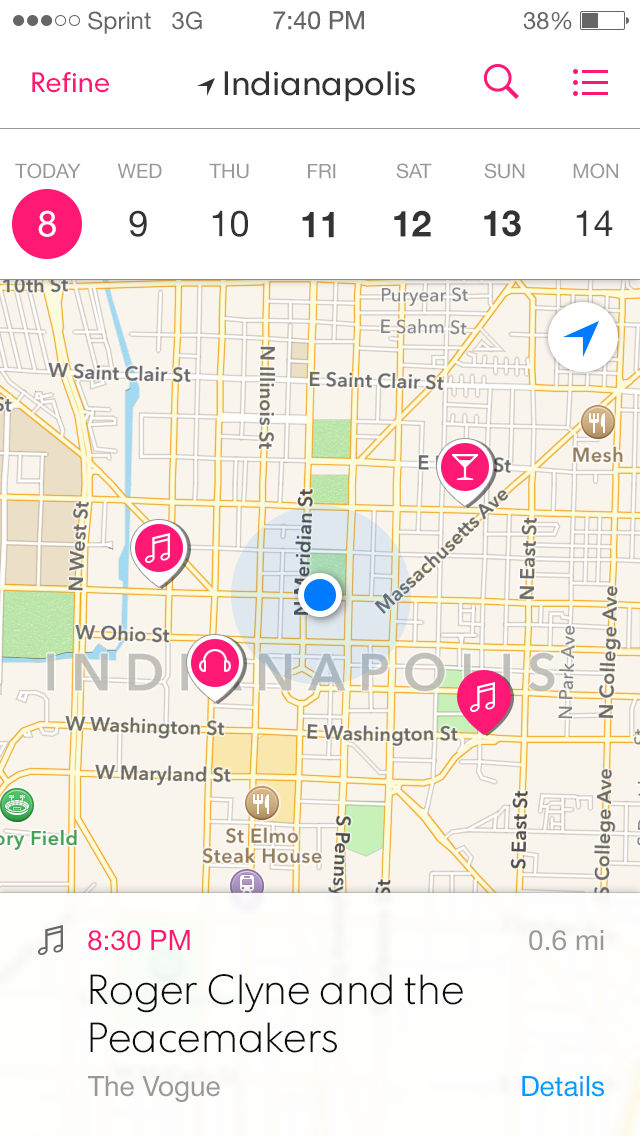
<style>
.page{position:relative;width:640px;height:1136px;background:#ffffff}
.page>*{position:absolute;margin:0}
.t1{font:24px "HelveticaNeue";color:#666666}
.t2{font:25px "HelveticaNeue";color:#666666}
.t3{font:28px "FuturaToday-Normal";color:#ff1975}
.t4{font:34px "FuturaToday-Normal";color:#333333}
.t5{font:20px "HelveticaNeue";color:#999999}
.t6{font:36px "HelveticaNeue";color:#ffffff}
.t7{font:36px "HelveticaNeue";color:#333333}
.t8{font:36px "HelveticaNeue-Bold";color:#333333}
.t9{font:28px "HelveticaNeue";color:#ff1975}
.t10{font:28px "HelveticaNeue";color:#999999}
.t11{font:42px/48px "FuturaToday-Light";color:#0c0c0c}
.t12{font:28px "HelveticaNeue";color:#009bff}
</style>
<div class="page">
<p class="t1" style="left:88px;top:11px;width:114px;height:23px">Sprint   3G</p>
<p class="t2" style="left:273px;top:11px;width:91px;height:19px">7:40 PM</p>
<p class="t1" style="left:523px;top:11px;width:49px;height:19px">38%</p>
<p class="t3" style="left:32px;top:72px;width:77px;height:21px">Refine</p>
<p class="t4" style="left:224px;top:71px;width:191px;height:31px">Indianapolis</p>
<p class="t5" style="left:15px;top:163px;width:66px;height:16px">TODAY</p>
<p class="t5" style="left:117px;top:163px;width:45px;height:15px">WED</p>
<p class="t5" style="left:209px;top:163px;width:40px;height:16px">THU</p>
<p class="t5" style="left:308px;top:164px;width:28px;height:15px">FRI</p>
<p class="t5" style="left:396px;top:163px;width:36px;height:16px">SAT</p>
<p class="t5" style="left:484px;top:163px;width:41px;height:16px">SUN</p>
<p class="t5" style="left:573px;top:163px;width:45px;height:16px">MON</p>
<p class="t6" style="left:38px;top:210px;width:18px;height:27px">8</p>
<p class="t7" style="left:129px;top:210px;width:18px;height:27px">9</p>
<p class="t7" style="left:212px;top:210px;width:36px;height:27px">10</p>
<p class="t8" style="left:302px;top:212px;width:32px;height:26px">11</p>
<p class="t8" style="left:394px;top:210px;width:37px;height:27px">12</p>
<p class="t8" style="left:484px;top:210px;width:37px;height:27px">13</p>
<p class="t7" style="left:576px;top:210px;width:37px;height:26px">14</p>
<p class="t9" style="left:88px;top:930px;width:102px;height:21px">8:30 PM</p>
<p class="t10" style="left:529px;top:930px;width:75px;height:21px">0.6 mi</p>
<p class="t11" style="left:90px;top:974px;width:373px;height:79px">Roger Clyne and the<br>Peacemakers</p>
<p class="t10" style="left:88px;top:1076px;width:132px;height:26px">The Vogue</p>
<p class="t12" style="left:522px;top:1076px;width:82px;height:21px">Details</p>
</div>
